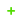
<style>
.page{position:relative;width:22px;height:22px;background:#ffffff}
.page>*{position:absolute;margin:0}
.t1{font:16px "OCRAStd";color:#54dc03}
</style>
<div class="page">
<p class="t1" style="left:7px;top:7px;width:9px;height:8px">+</p>
</div>
